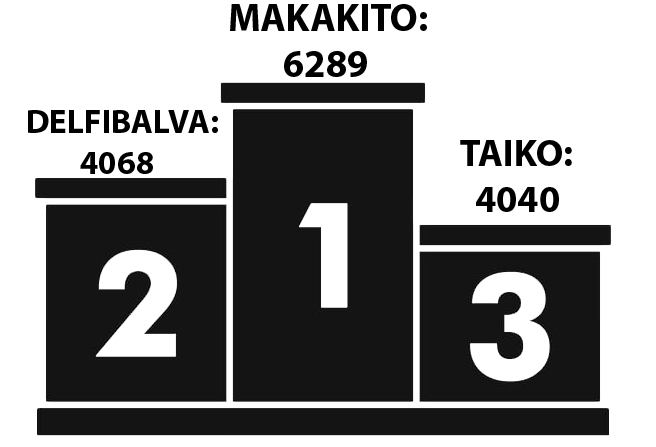
<style>
.page{position:relative;width:656px;height:447px;background:#ffffff}
.page>*{position:absolute;margin:0}
.t1{font:38.8px "MyriadPro-Bold";color:#000000}
.t2{font:33.6px "MyriadPro-Bold";color:#000000}
.t3{font:38.2px "MyriadPro-Bold";color:#000000}
</style>
<div class="page">
<p class="t1" style="left:230px;top:4px;width:197px;height:73px">MAKAKITO:<br>       6289</p>
<p class="t2" style="left:28px;top:110px;width:190px;height:64px">DELFIBALVA:<br>        4068</p>
<p class="t3" style="left:460px;top:140px;width:112px;height:72px">TAIKO:<br>  4040</p>
</div>
